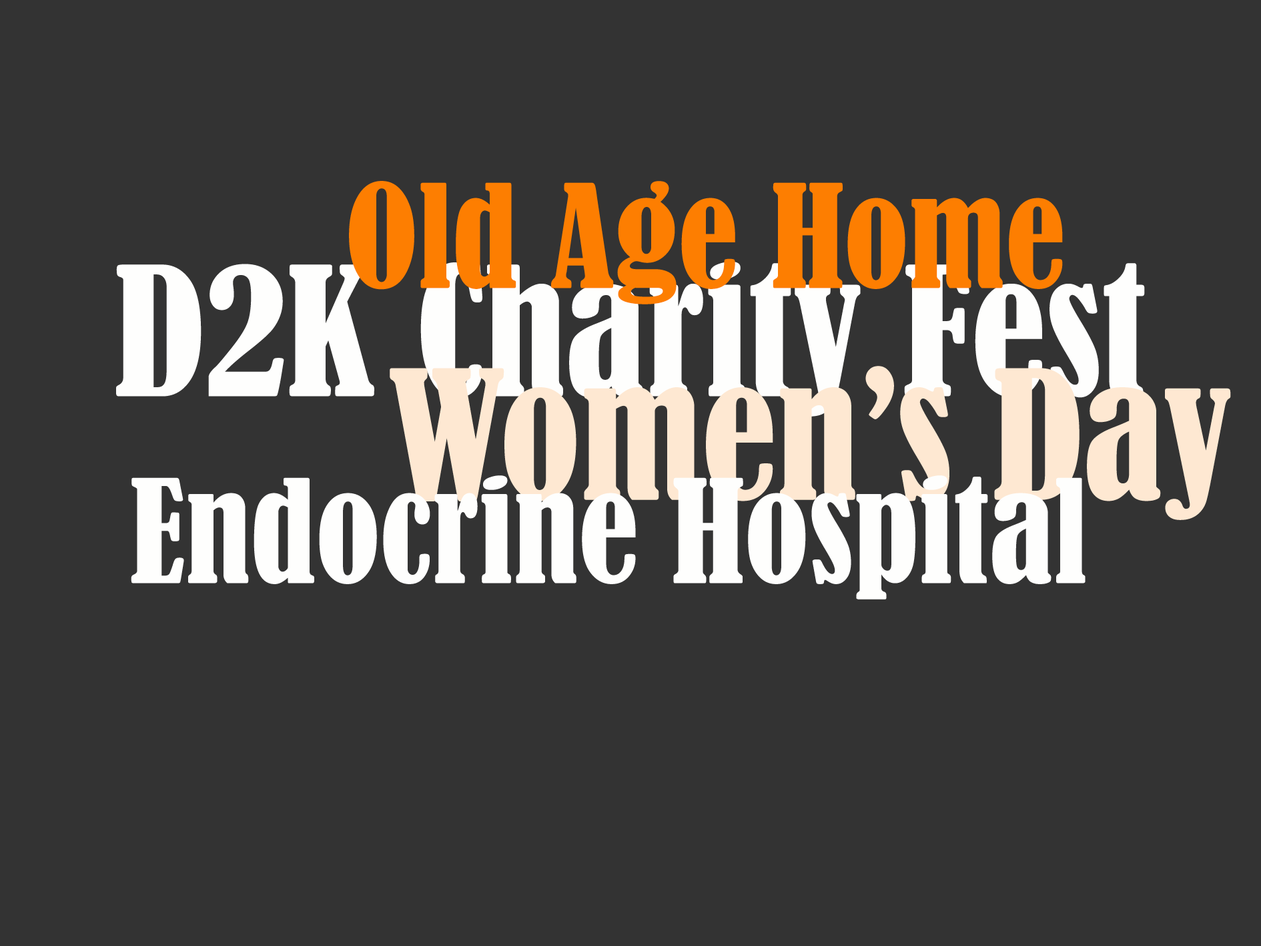
<style>
.page{position:relative;width:1261px;height:946px;background:#333333}
.page>*{position:absolute;margin:0}
.t1{font:133.5px "BernardMT-Condensed";color:#fd7e01}
.t2{font:166.8px "BernardMT-Condensed";color:#fefefd}
.t3{font:166.8px "BernardMT-Condensed";color:#fee8d2}
.t4{font:133.5px "BernardMT-Condensed";color:#fefefd}
</style>
<div class="page">
<p class="t1" style="left:349px;top:181px;width:714px;height:123px">Old Age Home</p>
<p class="t2" style="left:116px;top:262px;width:1029px;height:154px">D2K Charity Fest</p>
<p class="t3" style="left:390px;top:366px;width:841px;height:154px">Women’s Day</p>
<p class="t4" style="left:131px;top:475px;width:955px;height:124px">Endocrine Hospital</p>
</div>
